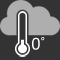
<style>
.page{position:relative;width:60px;height:60px;background:#333333}
.page>*{position:absolute;margin:0}
.t1{font:18px "Calibri";letter-spacing:-0.025em;color:#ffffff}
</style>
<div class="page">
<p class="t1" style="left:32px;top:37px;width:13px;height:13px">0˚</p>
</div>
